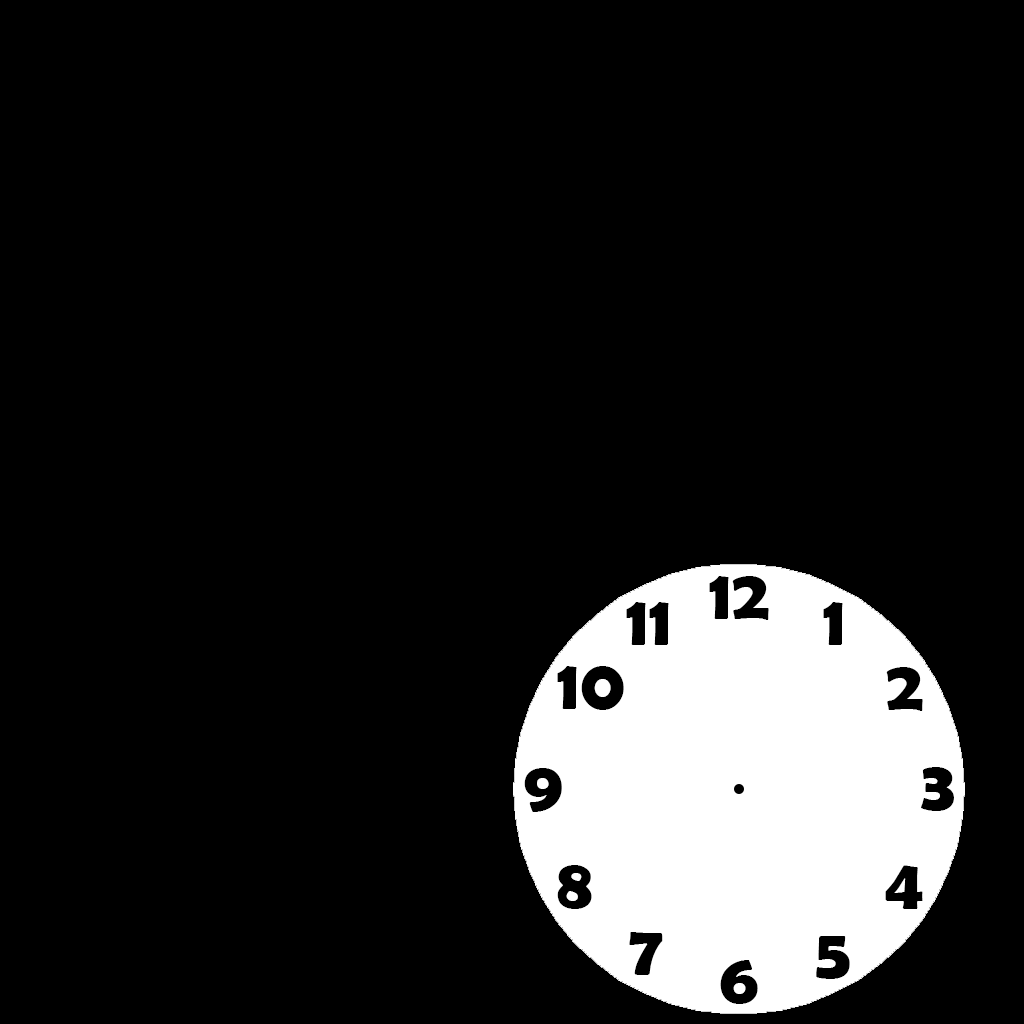
<style>
.page{position:relative;width:1024px;height:1024px;background:#000000}
.page>*{position:absolute;margin:0}
.t1{font:72px "BerlinSansFBDemi-Bold";color:#000000}
</style>
<div class="page">
<p class="t1" style="left:709px;top:576px;width:60px;height:44px">12</p>
<p class="t1" style="left:626px;top:602px;width:43px;height:43px">11</p>
<p class="t1" style="left:823px;top:602px;width:20px;height:43px">1</p>
<p class="t1" style="left:557px;top:666px;width:67px;height:44px">10</p>
<p class="t1" style="left:886px;top:667px;width:37px;height:44px">2</p>
<p class="t1" style="left:524px;top:768px;width:38px;height:44px">9</p>
<p class="t1" style="left:921px;top:767px;width:33px;height:44px">3</p>
<p class="t1" style="left:557px;top:865px;width:35px;height:44px">8</p>
<p class="t1" style="left:885px;top:865px;width:38px;height:44px">4</p>
<p class="t1" style="left:629px;top:932px;width:34px;height:43px">7</p>
<p class="t1" style="left:816px;top:936px;width:34px;height:43px">5</p>
<p class="t1" style="left:720px;top:960px;width:38px;height:44px">6</p>
</div>
